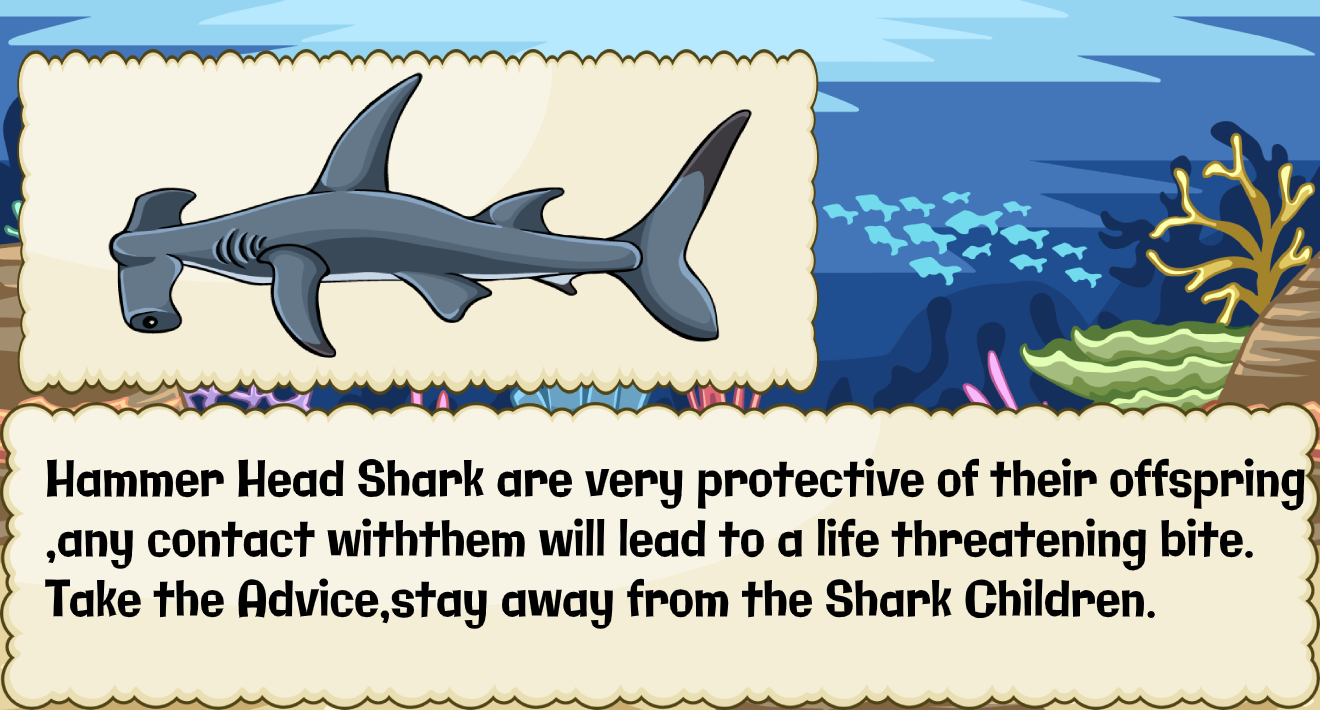
<style>
.page{position:relative;width:1320px;height:710px;background:#f4eed7}
.page>*{position:absolute;margin:0}
.t1{font:50.1px "Galindo-Regular";color:#000000;scale:0.82 1}
</style>
<div class="page">
<p class="t1" style="left:45px;top:458px;width:1260px;height:171px">Hammer Head Shark are very protective of their offspring<br>,any contact withthem will lead to a life threatening bite.<br>Take the Advice,stay away from the Shark Children.</p>
</div>
